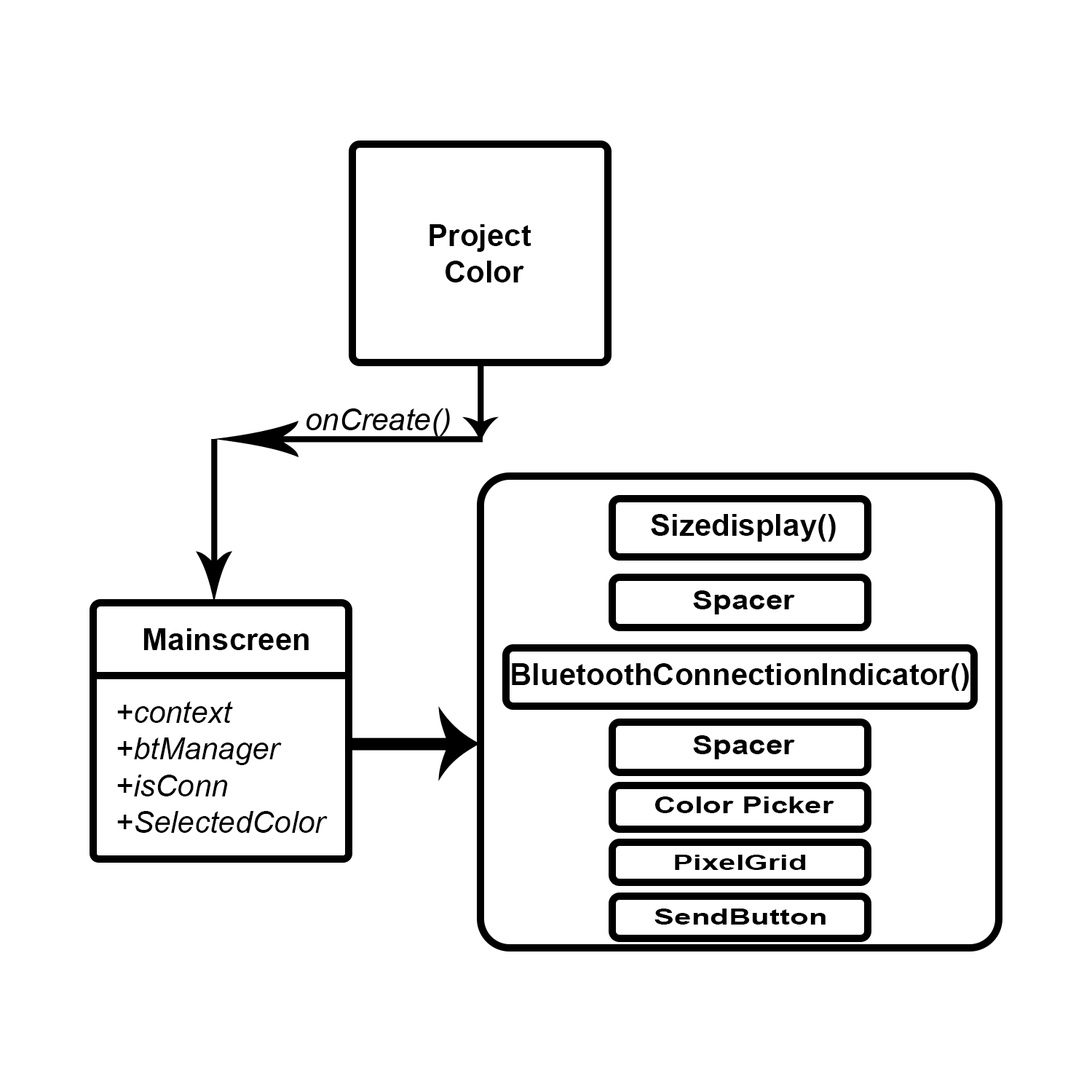
<style>
.page{position:relative;width:1092px;height:1092px;background:#ffffff}
.page>*{position:absolute;margin:0}
.t1{font:30.6px "Arial-BoldMT";color:#000000}
.t2{font:30.6px "Arial-ItalicMT";color:#000000}
.t3{font:26.4px "Arial-BoldMT";color:#000000;scale:1.16 1}
.t4{font:23.1px "Arial-BoldMT";color:#000000;scale:1.32 1}
.t5{font:21px "Arial-BoldMT";color:#000000;scale:1.45 1}
.t6{font:22.1px "Arial-BoldMT";color:#000000;scale:1.39 1}
</style>
<div class="page">
<p class="t1" style="left:430px;top:224px;width:101px;height:58px;text-align:center">Project <br>Color</p>
<p class="t2" style="left:306px;top:408px;width:144px;height:28px">onCreate()</p>
<p class="t1" style="left:651px;top:514px;width:185px;height:28px">Sizedisplay()</p>
<p class="t3" style="left:693px;top:590px;width:102px;height:24px">Spacer</p>
<p class="t1" style="left:143px;top:628px;width:166px;height:22px">Mainscreen</p>
<p class="t1" style="left:512px;top:663px;width:457px;height:28px">BluetoothConnectionIndicator()</p>
<p class="t2" style="left:117px;top:701px;width:211px;height:132px;text-align:justify">+context<br>+btManager<br>+isConn<br>+SelectedColor</p>
<p class="t3" style="left:693px;top:735px;width:102px;height:24px">Spacer</p>
<p class="t4" style="left:655px;top:796px;width:179px;height:17px">Color Picker</p>
<p class="t5" style="left:675px;top:855px;width:131px;height:15px">PixelGrid</p>
<p class="t6" style="left:654px;top:909px;width:172px;height:16px">SendButton</p>
</div>
